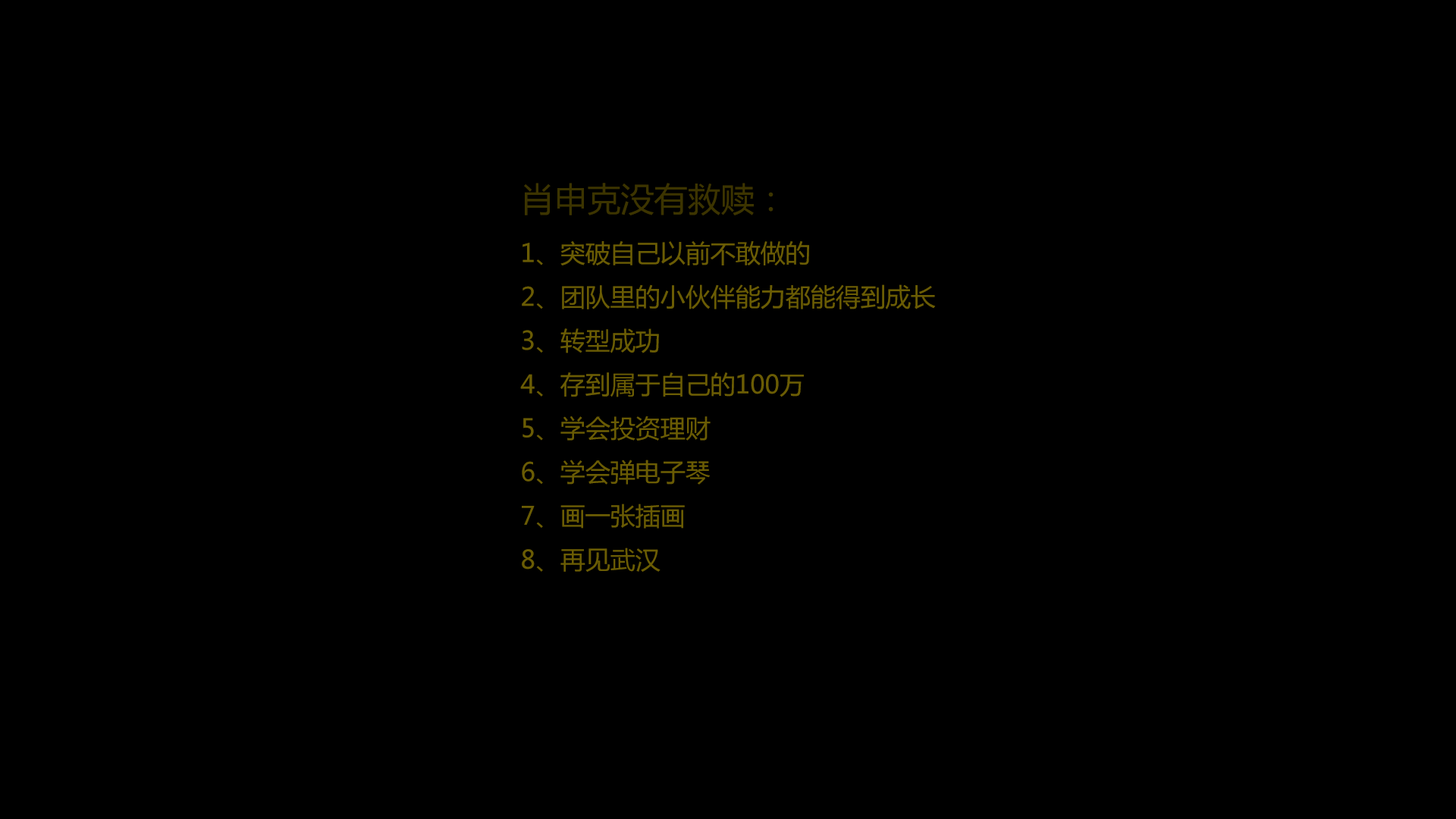
<style>
.page{position:relative;width:1456px;height:819px;background:#000000}
.page>*{position:absolute;margin:0}
.t1{font:25px "MicrosoftYaHei";color:#6a5c04}
.t2{font:33.4px "MicrosoftYaHei";color:#3c3400}
</style>
<div class="page">
<p class="t1" style="left:520px;top:183px;width:416px;height:389px"><span class="t2">肖申克没有救赎：<br></span>1、突破自己以前不敢做的<br>2、团队里的小伙伴能力都能得到成长<br>3、转型成功<br>4、存到属于自己的100万<br>5、学会投资理财<br>6、学会弹电子琴<br>7、画一张插画<br>8、再见武汉</p>
</div>
